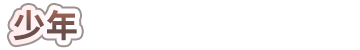
<style>
.page{position:relative;width:360px;height:50px;background:#ffffff}
.page>*{position:absolute;margin:0}
.t1{font:32px "SourceHanSansSC-Bold";color:#77544d;font-weight:bold}
</style>
<div class="page">
<p class="t1" style="left:13px;top:9px;width:64px;height:32px">少年</p>
</div>
